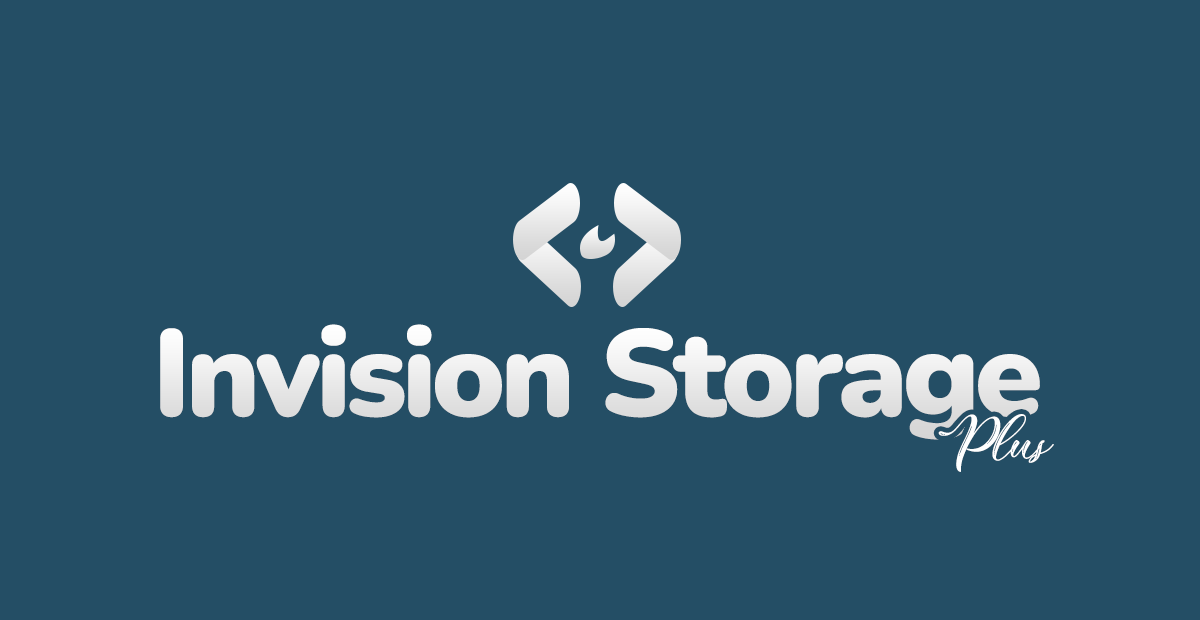
<style>
.page{position:relative;width:1200px;height:620px;background:#244e65}
.page>*{position:absolute;margin:0}
.t1{font:122.8px "Nunito-Black";letter-spacing:-0.04em;color:#e9e9e9}
.t2{font:55.4px "DemielaFree-Medium";letter-spacing:-0.04em;color:#ffffff}
</style>
<div class="page">
<p class="t1" style="left:160px;top:324px;width:880px;height:116px">Invision Storage</p>
<p class="t2" style="left:938px;top:414px;width:116px;height:58px">Plus</p>
</div>
